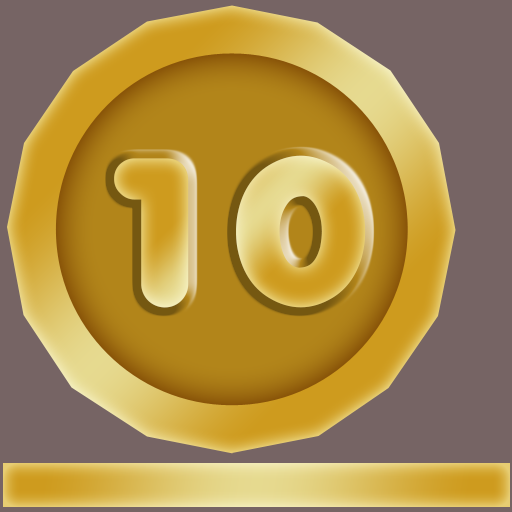
<style>
.page{position:relative;width:512px;height:512px;background:#766464}
.page>*{position:absolute;margin:0}
.t1{font:203px "Anja-Eliane-Nornal"}
</style>
<div class="page">
<p class="t1" style="left:114px;top:155px;width:252px;height:153px">10</p>
</div>
